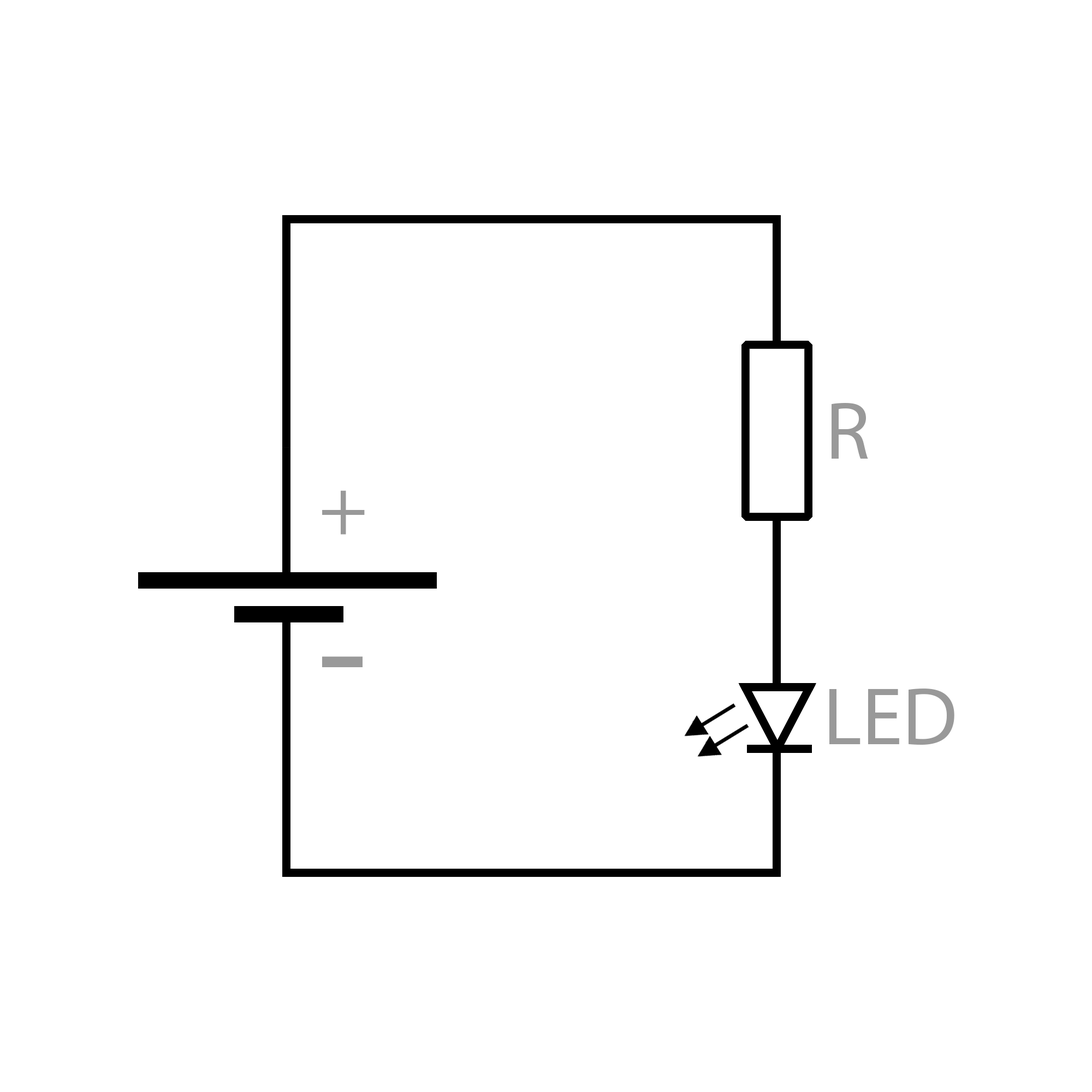
<style>
.page{position:relative;width:1092px;height:1092px;background:#ffffff}
.page>*{position:absolute;margin:0}
.t1{font:82px "MyriadPro-Regular";color:#999999}
.t2{font:163.5px "MyriadPro-Regular";color:#999999}
</style>
<div class="page">
<p class="t1" style="left:832px;top:403px;width:36px;height:56px">R</p>
<p class="t1" style="left:322px;top:490px;width:43px;height:45px">+</p>
<p class="t2" style="left:322px;top:656px;width:41px;height:11px">-</p>
<p class="t1" style="left:829px;top:688px;width:125px;height:57px">LED</p>
</div>
